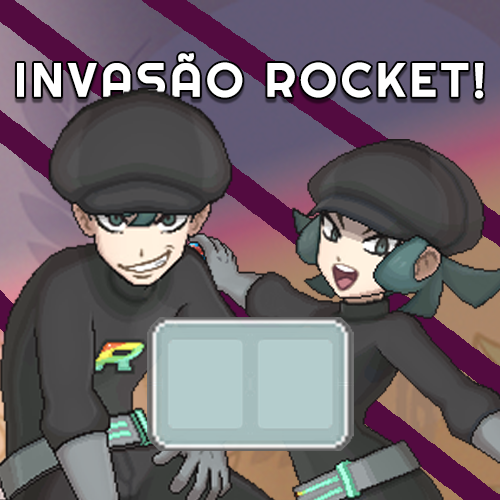
<style>
.page{position:relative;width:500px;height:500px}
.page>*{position:absolute;margin:0}
.t1{font:48px "Righteous-Regular";letter-spacing:0.08em;color:#ffffff}
</style>
<div class="page">
<p class="t1" style="left:17px;top:53px;width:467px;height:46px">INVASÃO ROCKET!</p>
</div>
